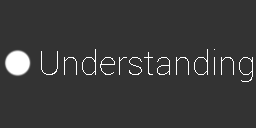
<style>
.page{position:relative;width:256px;height:128px;background:#333333}
.page>*{position:absolute;margin:0}
.t1{font:34px "Roboto-Thin";color:#ffffff}
</style>
<div class="page">
<p class="t1" style="left:41px;top:49px;width:212px;height:33px">Understanding</p>
</div>
